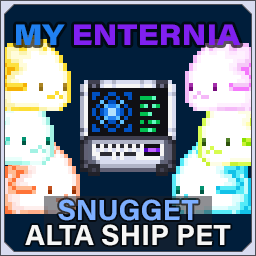
<style>
.page{position:relative;width:256px;height:256px;background:#001e3b}
.page>*{position:absolute;margin:0}
.t1{font:29.2px "AcuminConcept_760.000wght_112.000wdth";color:#8020f0}
.t2{font:29.2px "AcuminConcept_760.000wght_112.000wdth";color:#2080f0}
.t3{font:29.2px/25px "AcuminConcept-Bold";color:#f6f6f6}
.t4{font:29.2px/25px "AcuminConcept-Bold";color:#7eafff}
</style>
<div class="page">
<p class="t1" style="left:16px;top:24px;width:225px;height:21px"><span class="t2">MY </span>ENTERNIA</p>
<p class="t3" style="left:25px;top:199px;width:206px;height:47px;text-align:center"><span class="t4">SNUGGET<br></span>ALTA SHIP PET</p>
</div>
